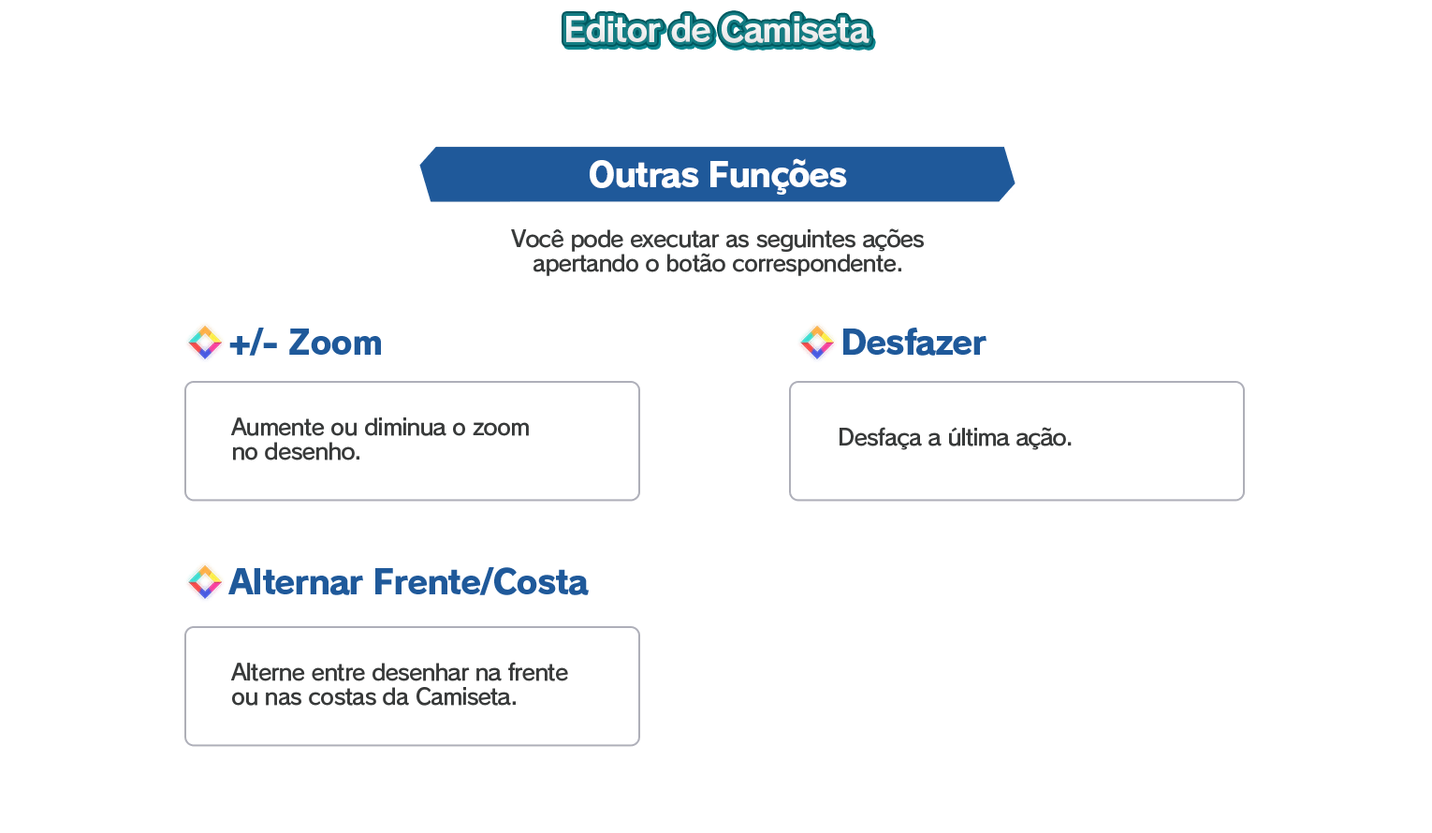
<style>
.page{position:relative;width:1432px;height:833px;background:#ffffff}
.page>*{position:absolute;margin:0}
.t1{font:33.7px "RodinPro-B";letter-spacing:-0.039em;color:#f0f0f1}
.t2{font:33.7px "RodinPro-EB";letter-spacing:-0.048em;color:#ffffff}
.t3{font:22.5px/23.7px "RodinPro-DB";letter-spacing:-0.04em;color:#383a3a}
.t4{font:33.7px "RodinPro-EB";letter-spacing:-0.04em;color:#1f599a}
.t5{font:22.5px "RodinPro-DB";letter-spacing:-0.04em;color:#383a3a}
</style>
<div class="page">
<p class="t1" style="left:566px;top:15px;width:303px;height:28px">Editor de Camiseta</p>
<p class="t2" style="left:590px;top:158px;width:257px;height:37px">Outras Funções</p>
<p class="t3" style="left:511px;top:228px;width:413px;height:48px;text-align:center">Você pode executar as seguintes ações<br>apertando o botão correspondente.</p>
<p class="t4" style="left:229px;top:328px;width:152px;height:28px">+/- Zoom</p>
<p class="t4" style="left:843px;top:328px;width:143px;height:28px">Desfazer</p>
<p class="t3" style="left:231px;top:417px;width:298px;height:43px">Aumente ou diminua o zoom<br>no desenho.</p>
<p class="t5" style="left:839px;top:427px;width:232px;height:23px">Desfaça a última ação.</p>
<p class="t4" style="left:228px;top:567px;width:361px;height:28px">Alternar Frente/Costa</p>
<p class="t3" style="left:231px;top:662px;width:337px;height:44px">Alterne entre desenhar na frente<br>ou nas costas da Camiseta.</p>
</div>
